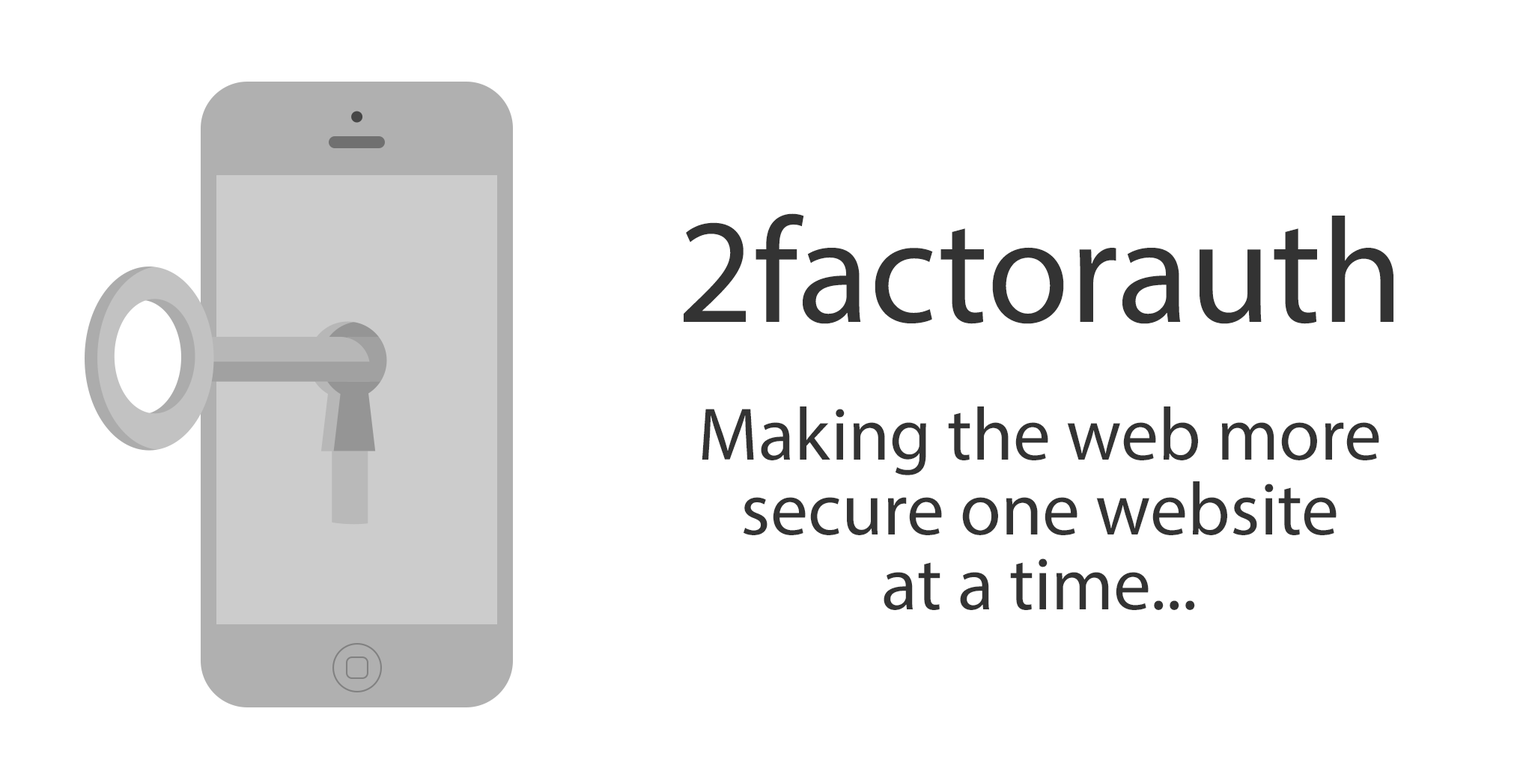
<style>
.page{position:relative;width:1529px;height:780px;background:#ffffff}
.page>*{position:absolute;margin:0}
.t1{font:149.7px "MyriadPro-Regular";color:#333333}
.t2{font:74.9px/74.9px "MyriadPro-Regular";color:#333333}
</style>
<div class="page">
<p class="t1" style="left:683px;top:213px;width:710px;height:111px">2factorauth</p>
<p class="t2" style="left:701px;top:406px;width:678px;height:204px;text-align:center">Making the web more<br>secure one website<br>at a time...</p>
</div>
